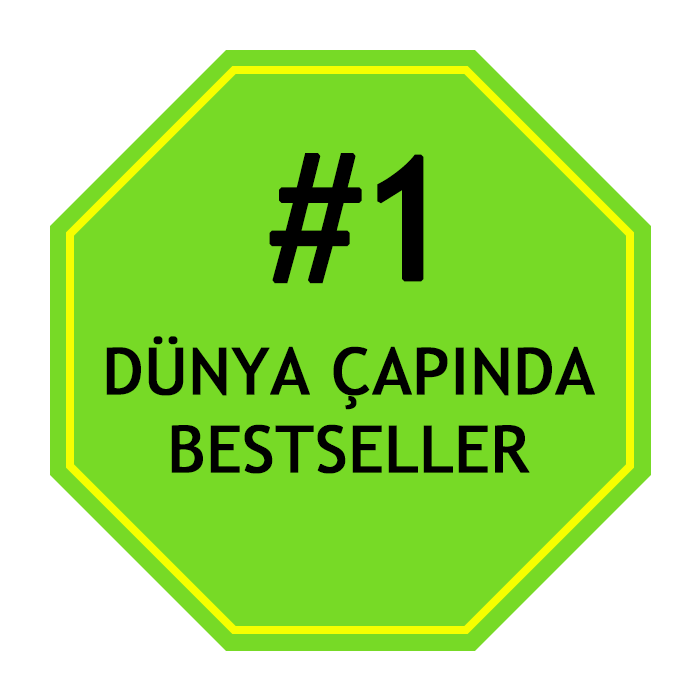
<style>
.page{position:relative;width:700px;height:700px;background:#77da26}
.page>*{position:absolute;margin:0}
.t1{font:170px "TrebuchetMS";color:#000000;font-weight:bold}
.t2{font:65px "TrebuchetMS";color:#000000;font-weight:bold}
</style>
<div class="page">
<p class="t1" style="left:269px;top:153px;width:155px;height:131px">#1</p>
<p class="t2" style="left:106px;top:336px;width:489px;height:138px;text-align:center">DÜNYA ÇAPINDA<br>BESTSELLER</p>
</div>
